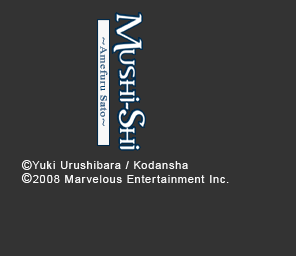
<style>
.page{position:relative;width:296px;height:256px;background:#333333}
.page>*{position:absolute;margin:0}
.t1{font:9.6px "TimesNewRomanPSMT";letter-spacing:0.05em;color:#004070;scale:1.21 1}
.t2{font:9.6px "KozGoPr6N-Regular";letter-spacing:0.05em;color:#004070;scale:1.33 1}
.t3{font:11px/13.6px "ArialMT";letter-spacing:0.075em;color:#f8f8f8}
.t4{font:12.7px/13.6px "ArialMT";letter-spacing:0.075em;color:#f8f8f8}
</style>
<div class="page">
<p class="t1" style="left:100px;top:37px;width:8px;height:89px;rotate:90deg"><span class="t2">~</span>Amefuru Sato<span class="t2">~</span></p>
<p class="t3" style="left:21px;top:160px;width:208px;height:23px"><span class="t4">©</span>Yuki Urushibara / Kodansha<br><span class="t4">©</span>2008 Marvelous Entertainment Inc.</p>
</div>
